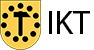
<style>
.page{position:relative;width:94px;height:50px;background:#ffffff}
.page>*{position:absolute;margin:0}
.t1{font:33.8px "MyriadPro-Regular";color:#000000}
</style>
<div class="page">
<p class="t1" style="left:49px;top:11px;width:41px;height:23px">IKT</p>
</div>
